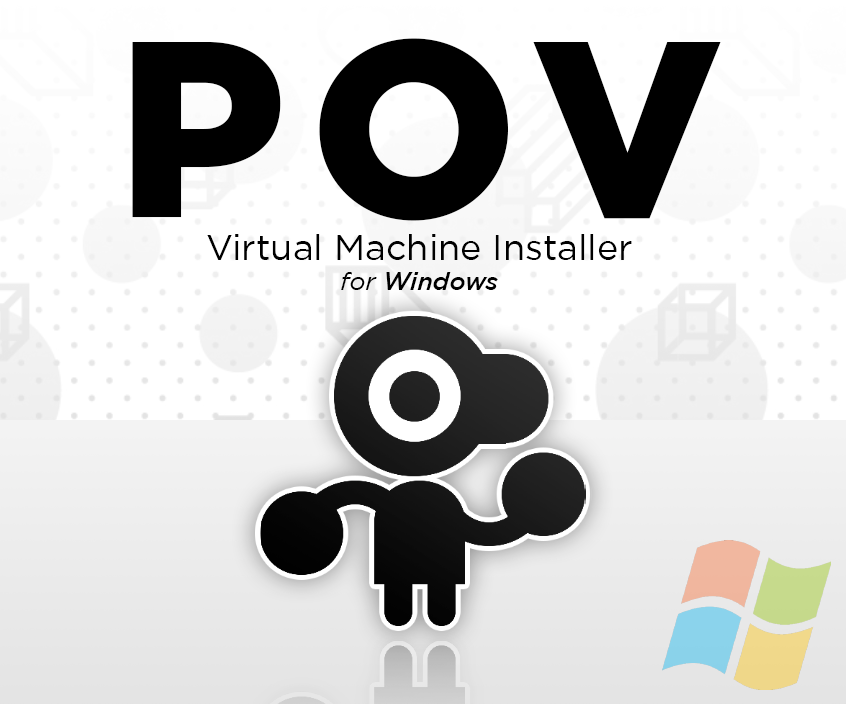
<style>
.page{position:relative;width:846px;height:704px;background:#ffffff}
.page>*{position:absolute;margin:0}
.t1{font:36px "Gotham-Book";color:#000000}
.t2{font:250px "Gotham-Black";letter-spacing:0.1em;color:#000000}
.t3{font:25px "Gotham-BookItalic";color:#000000}
.t4{font:25px "Gotham-MediumItalic";color:#000000}
</style>
<div class="page">
<p class="t1" style="left:132px;top:38px;width:589px;height:252px;text-align:center"><span class="t2">POV<br></span>Virtual Machine Installer<br><span class="t3">for </span><span class="t4">Windows</span></p>
</div>
